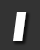
<style>
.page{position:relative;width:40px;height:50px;background:#333333}
.page>*{position:absolute;margin:0}
.t1{font:42px "NauSea";letter-spacing:0.04em;color:#ffffff;scale:1.12 1}
</style>
<div class="page">
<p class="t1" style="left:13px;top:12px;width:14px;height:29px">1</p>
</div>
